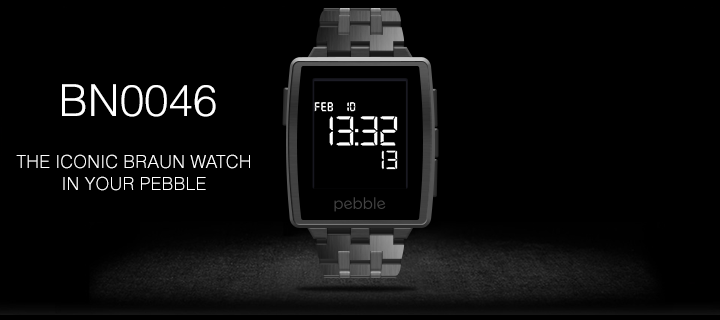
<style>
.page{position:relative;width:720px;height:320px;background:#000000}
.page>*{position:absolute;margin:0}
.t1{font:44px "Helvetica-Light";color:#ffffff;text-transform:uppercase}
.t2{font:18px/22px "Helvetica-Light";color:#ffffff;text-transform:uppercase}
</style>
<div class="page">
<p class="t1" style="left:62px;top:84px;width:154px;height:33px">BN0046</p>
<p class="t2" style="left:16px;top:154px;width:234px;height:37px;text-align:center">The ICONIc BRaUN Watch<br>In Your PeBBle</p>
</div>
